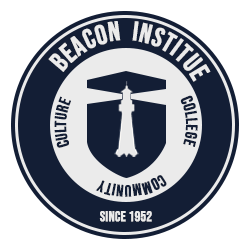
<style>
.page{position:relative;width:250px;height:250px;background:#131e35}
.page>*{position:absolute;margin:0}
.t1{font:27.1px "BebasNeue-Regular";color:#ebebeb;font-weight:bold}
.t2{font:13.9px "BebasNeue-Regular";color:#ebebeb;font-weight:bold}
</style>
<div class="page">
<p class="t1" style="left:48px;top:21px;width:163px;height:61px;text-align:center">BEACON  INSTITUE</p>
<p class="t2" style="left:99px;top:211px;width:53px;height:11px">since 1952</p>
</div>
